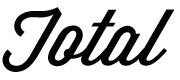
<style>
.page{position:relative;width:180px;height:80px;background:#ffffff}
.page>*{position:absolute;margin:0}
.t1{font:77px "Wisdom-Script";color:#040404}
</style>
<div class="page">
<p class="t1" style="left:2px;top:7px;width:173px;height:65px">Total</p>
</div>
